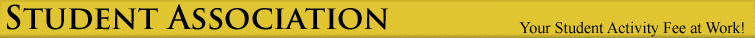
<style>
.page{position:relative;width:755px;height:38px;background:#e0c430}
.page>*{position:absolute;margin:0}
.t1{font:32px "TrajanPro-Bold";color:#000000}
.t2{font:16px "TimesNewRomanPSMT";color:#000000}
</style>
<div class="page">
<p class="t1" style="left:7px;top:4px;width:382px;height:26px">Student Association</p>
<p class="t2" style="left:519px;top:21px;width:225px;height:16px">Your Student Activity Fee at Work!</p>
</div>
